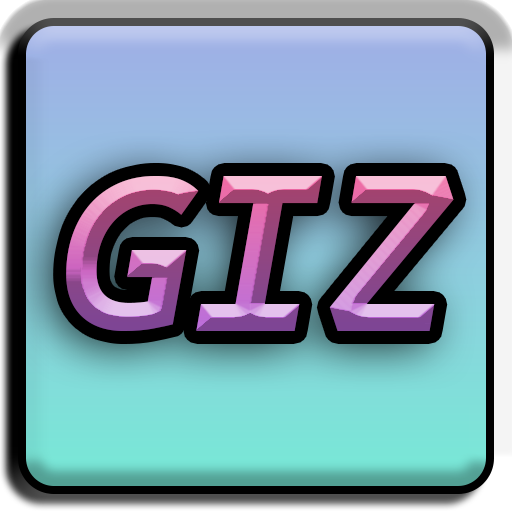
<style>
.page{position:relative;width:512px;height:512px}
.page>*{position:absolute;margin:0}
.t1{font:224px "CascadiaCode-BoldItalic"}
</style>
<div class="page">
<p class="t1" style="left:66px;top:176px;width:388px;height:155px">GIZ</p>
</div>
